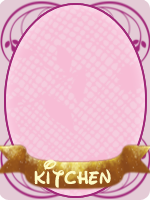
<style>
.page{position:relative;width:150px;height:200px}
.page>*{position:absolute;margin:0}
.t1{font:37.4px "Waltograph";color:#fcfac7}
</style>
<div class="page">
<p class="t1" style="left:34px;top:159px;width:77px;height:29px">kitchen</p>
</div>
